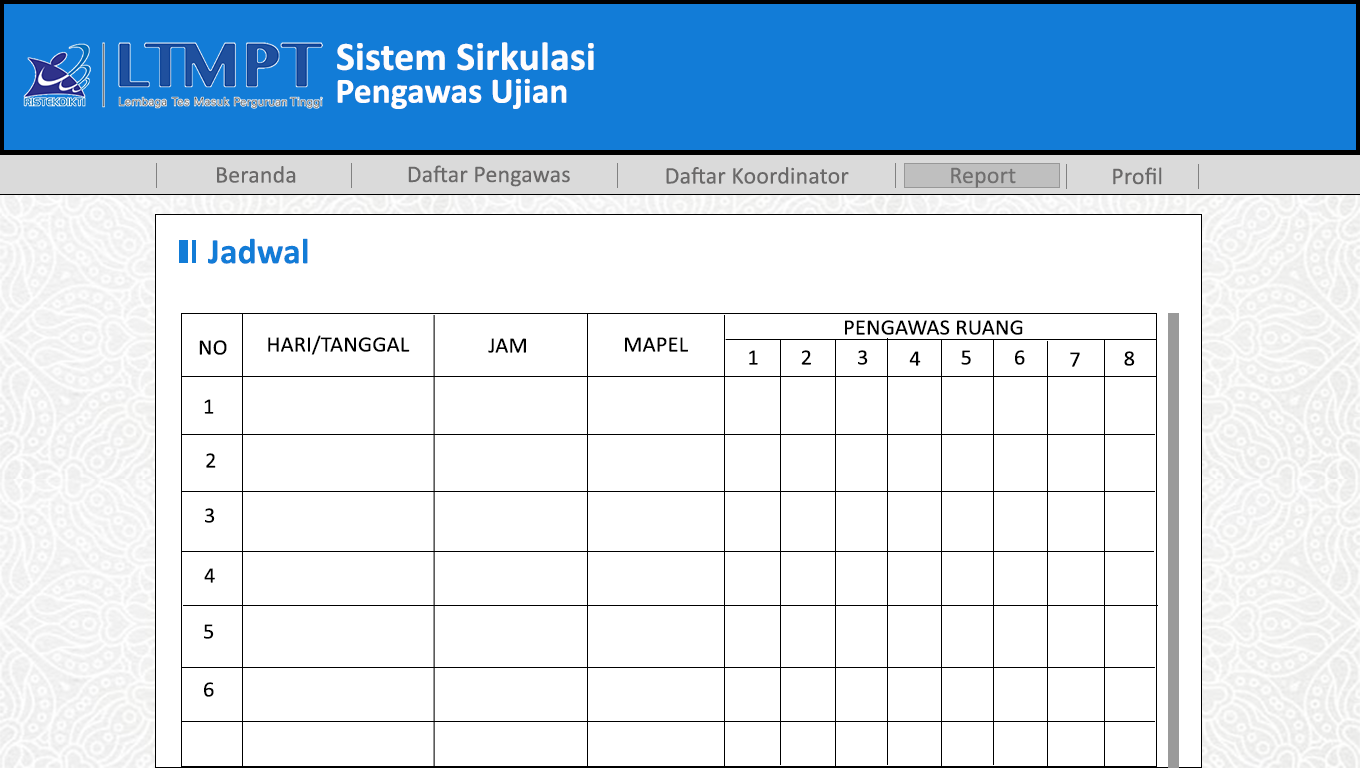
<style>
.page{position:relative;width:1360px;height:768px;background:#ffffff}
.page>*{position:absolute;margin:0}
.t1{font:40.1px "Calibri-Bold";letter-spacing:0.005em;color:#fdfdfd}
.t2{font:35.6px "Calibri-Bold";letter-spacing:0.005em;color:#fffefe}
.t3{font:24px "Calibri";letter-spacing:0.005em;color:#6a6969}
.t4{font:36px "Calibri-Bold";letter-spacing:0.005em;color:#127cd7}
.t5{font:22px "Calibri";letter-spacing:0.005em;color:#000000}
</style>
<div class="page">
<p class="t1" style="left:337px;top:42px;width:257px;height:29px">Sistem Sirkulasi</p>
<p class="t2" style="left:337px;top:78px;width:230px;height:31px">Pengawas Ujian</p>
<p class="t3" style="left:217px;top:166px;width:79px;height:17px">Beranda</p>
<p class="t3" style="left:408px;top:165px;width:162px;height:22px">Daftar Pengawas</p>
<p class="t3" style="left:666px;top:167px;width:183px;height:17px">Daftar Koordinator</p>
<p class="t3" style="left:951px;top:167px;width:65px;height:21px">Report</p>
<p class="t3" style="left:1113px;top:167px;width:49px;height:18px">Profil</p>
<p class="t4" style="left:208px;top:238px;width:100px;height:26px">Jadwal</p>
<p class="t5" style="left:845px;top:320px;width:178px;height:15px">PENGAWAS RUANG</p>
<p class="t5" style="left:199px;top:340px;width:28px;height:15px">NO</p>
<p class="t5" style="left:268px;top:335px;width:142px;height:20px">HARI/TANGGAL</p>
<p class="t5" style="left:488px;top:338px;width:38px;height:15px">JAM</p>
<p class="t5" style="left:625px;top:337px;width:63px;height:15px">MAPEL</p>
<p class="t5" style="left:749px;top:350px;width:9px;height:15px">1</p>
<p class="t5" style="left:801px;top:350px;width:10px;height:15px">2</p>
<p class="t5" style="left:858px;top:350px;width:10px;height:15px">3</p>
<p class="t5" style="left:909px;top:351px;width:12px;height:15px">4</p>
<p class="t5" style="left:961px;top:350px;width:10px;height:15px">5</p>
<p class="t5" style="left:1015px;top:350px;width:10px;height:15px">6</p>
<p class="t5" style="left:1070px;top:352px;width:10px;height:15px">7</p>
<p class="t5" style="left:1124px;top:351px;width:11px;height:15px">8</p>
<p class="t5" style="left:204px;top:399px;width:10px;height:15px">1</p>
<p class="t5" style="left:206px;top:453px;width:10px;height:15px">2</p>
<p class="t5" style="left:205px;top:508px;width:10px;height:15px">3</p>
<p class="t5" style="left:204px;top:568px;width:11px;height:15px">4</p>
<p class="t5" style="left:204px;top:624px;width:10px;height:15px">5</p>
<p class="t5" style="left:204px;top:682px;width:10px;height:15px">6</p>
</div>
